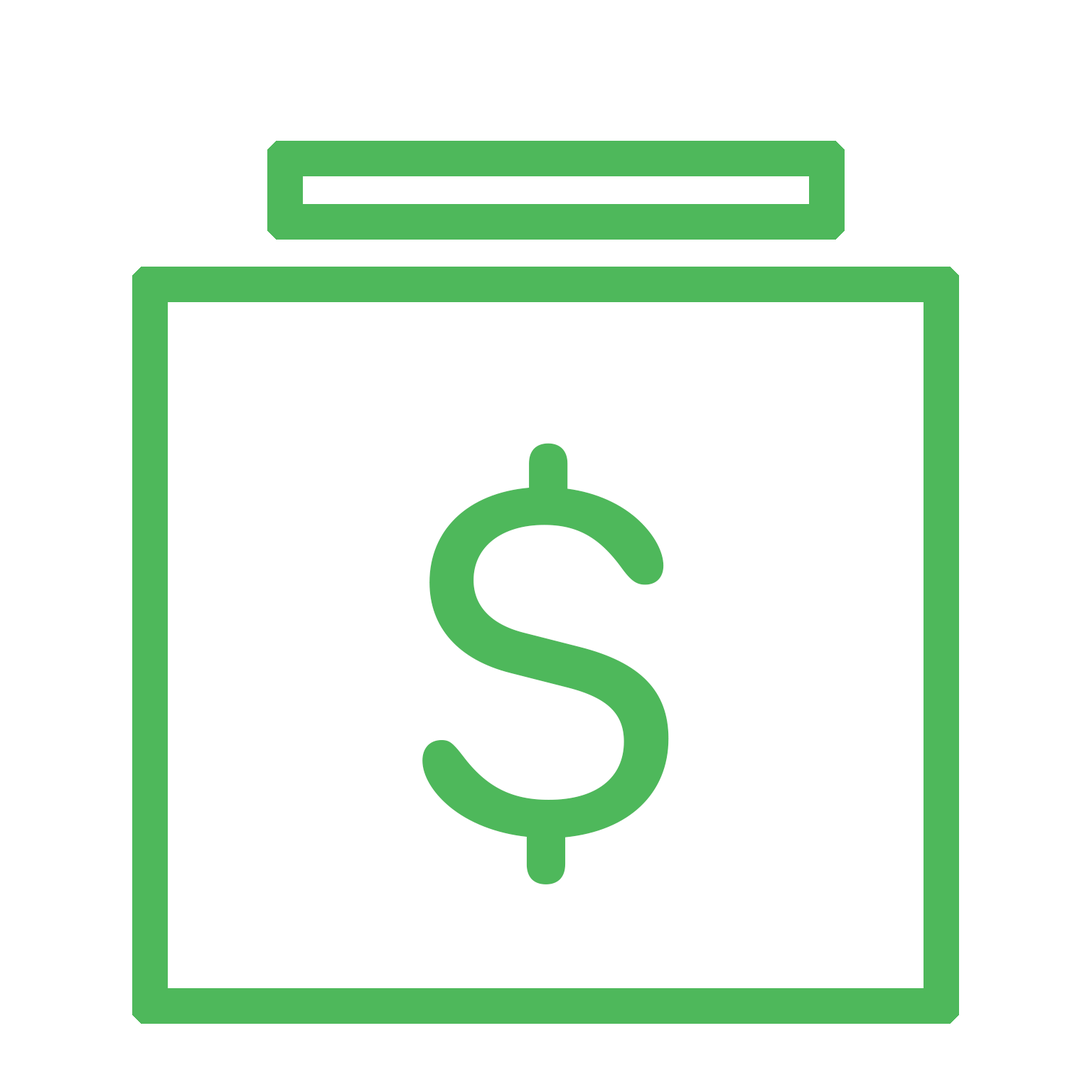
<style>
.page{position:relative;width:1092px;height:1092px;background:#ffffff}
.page>*{position:absolute;margin:0}
.t1{font:518.4px "SFCompactRounded-Regular";color:#4eb85b}
</style>
<div class="page">
<p class="t1" style="left:422px;top:443px;width:247px;height:441px">$</p>
</div>
